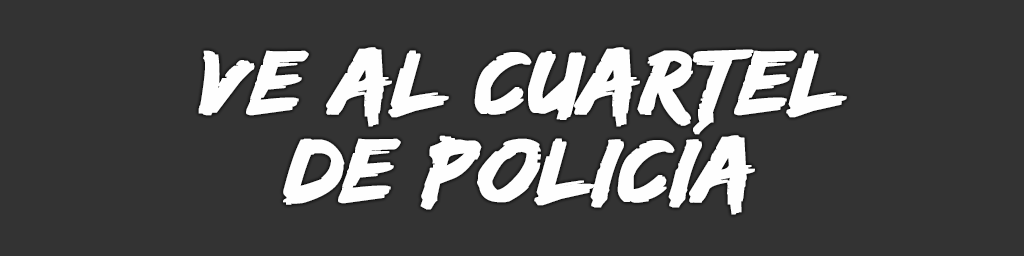
<style>
.page{position:relative;width:1024px;height:256px;background:#333333}
.page>*{position:absolute;margin:0}
.t1{font:94px/88px "EdoSZ";color:#fefefe;font-weight:bold;font-style:italic;scale:1.04 1}
</style>
<div class="page">
<p class="t1" style="left:198px;top:47px;width:649px;height:168px;text-align:center">Ve al cuartel<br>de policía</p>
</div>
